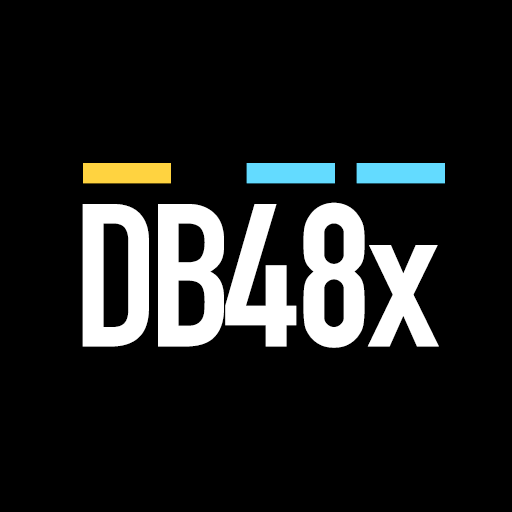
<style>
.page{position:relative;width:512px;height:512px;background:#000000}
.page>*{position:absolute;margin:0}
.t1{font:395.4px "DINCondensed-Bold";color:#ffd340;scale:0.45 1}
.t2{font:395.4px "DINCondensed-Bold";color:#63dbff;scale:0.45 1}
.t3{font:199.8px "DINCondensed-Bold";letter-spacing:-0.005em;color:#ffffff}
.t4{font:199.8px "DINCondensed-Bold";letter-spacing:-0.05em;color:#ffffff}
</style>
<div class="page">
<p class="t1" style="left:83px;top:163px;width:88px;height:21px">_</p>
<p class="t2" style="left:246px;top:163px;width:89px;height:21px">_</p>
<p class="t2" style="left:356px;top:163px;width:89px;height:21px">_</p>
<p class="t3" style="left:82px;top:202px;width:357px;height:146px"><span class="t4">DB</span>48x</p>
</div>
